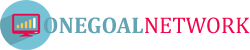
<style>
.page{position:relative;width:250px;height:50px;background:#ffffff}
.page>*{position:absolute;margin:0}
.t1{font:22.7px "Cambria-Bold";color:#63a4b4}
.t2{font:22.7px "Cambria";color:#f0064b}
</style>
<div class="page">
<p class="t1" style="left:44px;top:17px;width:206px;height:17px">ONEGOAL<span class="t2">NETWORK</span></p>
</div>
